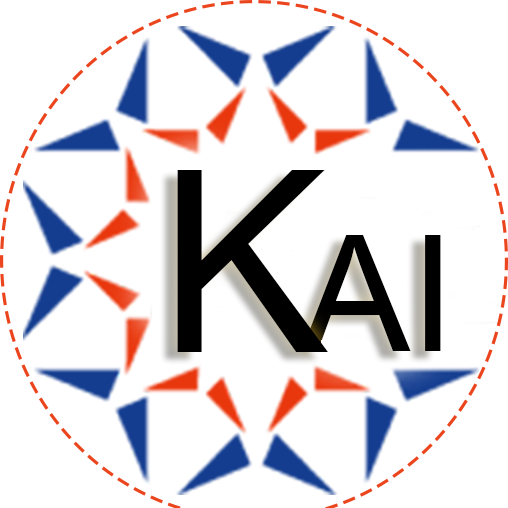
<style>
.page{position:relative;width:508px;height:508px;background:#ffffff}
.page>*{position:absolute;margin:0}
.t1{font:253.7px "ArialMT";color:#000000}
.t2{font:161.6px "ArialMT";color:#000000}
</style>
<div class="page">
<p class="t1" style="left:177px;top:170px;width:151px;height:182px">K</p>
<p class="t2" style="left:301px;top:235px;width:140px;height:116px">AI</p>
</div>
